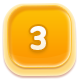
<style>
.page{position:relative;width:80px;height:80px}
.page>*{position:absolute;margin:0}
.t1{font:34.8px "Cartwheel";color:#ffffff;scale:1.03 1}
</style>
<div class="page">
<p class="t1" style="left:30px;top:26px;width:16px;height:24px">3</p>
</div>
